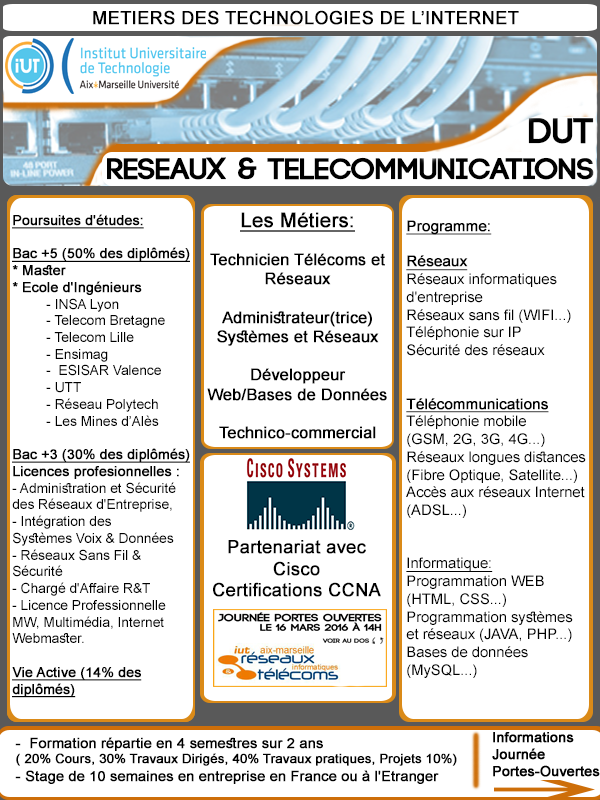
<style>
.page{position:relative;width:600px;height:800px;background:#ffffff}
.page>*{position:absolute;margin:0}
.t1{font:18px "ArialMT";color:#000000;font-weight:bold}
.t2{font:30px "Code-Bold";color:#000000;font-weight:bold}
.t3{font:36px "Code-Bold";color:#000000;font-weight:bold}
.t4{font:14px "ArialMT";color:#000000}
.t5{font:14px "ArialMT";color:#000000;font-weight:bold;text-decoration:underline}
.t6{font:14px "ArialMT";color:#000000;font-weight:bold}
.t7{font:16px "ArialMT";color:#000000;font-weight:bold}
.t8{font:20px "ArialMT";color:#000000;font-weight:bold;text-decoration:underline}
.t9{font:14.8px "ArialMT";color:#000000}
.t10{font:14.8px "ArialMT";color:#000000;font-weight:bold;text-decoration:underline}
.t11{font:14.8px "ArialMT";color:#000000;text-decoration:underline}
.t12{font:13px "ArialMT";color:#000000;font-weight:bold}
.t13{font:14.3px "ArialMT";color:#000000;font-weight:bold}
</style>
<div class="page">
<p class="t1" style="left:93px;top:10px;width:426px;height:15px">METIERS DES TECHNOLOGIES DE L’INTERNET</p>
<p class="t2" style="left:107px;top:118px;width:487px;height:62px"><span class="t3">DUT <br></span>RESEAUX &amp; TELECOMMUNICATIONS</p>
<p class="t4" style="left:12px;top:214px;width:178px;height:484px"><span class="t5">Poursuites d'études:<br><br>Bac +5 (50% des diplômés) <br></span><span class="t6">* Master<br>* Ecole d'Ingénieurs </span> <br> - INSA Lyon<br> - Telecom Bretagne<br> - Telecom Lille<br> - Ensimag<br> -  ESISAR Valence<br> - UTT<br> - Réseau Polytech<br> - Les Mines d’Alès<br><br><span class="t5">Bac +3 (30% des diplômés)<br></span><span class="t6">Licences profesionnelles : <br></span>- Administration et Sécurité des Réseaux d'Entreprise,<br>- Intégration des<br>Systèmes Voix &amp; Données<br>- Réseaux Sans Fil &amp; Sécurité<br>- Chargé d'Affaire R&amp;T<br>- Licence Professionnelle MW, Multimédia, Internet Webmaster.<br><br><span class="t5">Vie Active (14% des diplômés)</span></p>
<p class="t7" style="left:207px;top:212px;width:180px;height:227px;text-align:center"><span class="t8">Les Métiers:<br><br></span>Technicien Télécoms et Réseaux<br><br>Administrateur(trice) Systèmes et Réseaux<br><br>Développeur Web/Bases de Données<br><br>Technico-commercial</p>
<p class="t9" style="left:406px;top:220px;width:180px;height:458px"><span class="t10">Programme:<br><br>Réseaux<br></span>Réseaux informatiques d'entreprise<br>Réseaux sans fil (WIFI...)<br>Téléphonie sur IP<br>Sécurité des réseaux<br><br><br><span class="t10">Télécommunications<br></span>Téléphonie mobile <br>(GSM, 2G, 3G, 4G...)<br>Réseaux longues distances (Fibre Optique, Satellite...)<br>Accès aux réseaux Internet (ADSL...)<br><br><br><span class="t11">Informatique:<br></span>Programmation WEB <br>(HTML, CSS...)<br>Programmation systèmes et réseaux (JAVA, PHP...)<br>Bases de données (MySQL...)</p>
<p class="t1" style="left:213px;top:540px;width:168px;height:57px;text-align:center">Partenariat avec Cisco <br>Certifications CCNA</p>
<p class="t12" style="left:15px;top:737px;width:442px;height:47px"><span class="t13">-  Formation répartie en 4 semestres sur 2 ans <br></span>( 20% Cours, 30% Travaux Dirigés, 40% Travaux pratiques, Projets 10%)<br><span class="t13">- Stage de 10 semaines en entreprise en France ou à l'Etranger</span></p>
</div>
